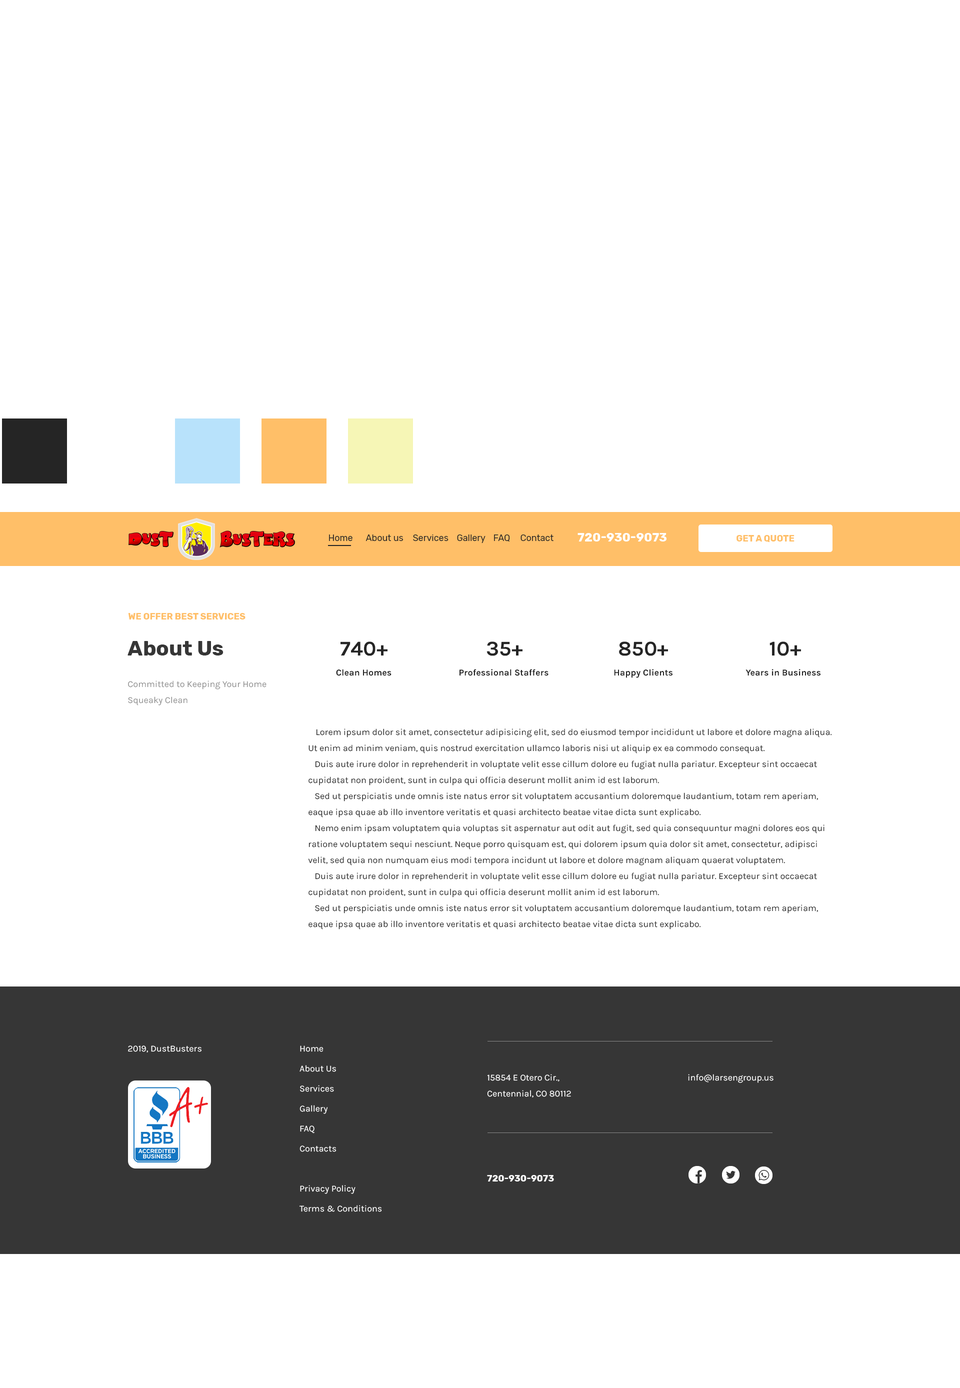
<style>
.page{position:relative;width:960px;height:1388px;background:#ffffff}
.page>*{position:absolute;margin:0}
.t1{font:12px "Rubik-Bold";color:#ffffff;text-transform:uppercase}
.t2{font:9px "Rubik-Regular";color:#252525}
.t3{font:9px "Rubik-Bold";color:#ffbf68;text-transform:uppercase}
.t4{font:21px "Rubik-Bold";color:#363636}
.t5{font:21px "Karla-Bold";color:#252525}
.t6{font:9px "Karla-Bold";color:#252525}
.t7{font:9px/16px "Karla-Regular";color:#909090}
.t8{font:9px/16px "Karla-Regular";color:#252525}
.t9{font:9px "Karla-Regular";color:#ffffff}
.t10{font:9px/20px "Karla-Regular";color:#ffffff}
.t11{font:9px/16.1px "Karla-Regular";color:#ffffff}
.t12{font:9px "Rubik-Bold";color:#ffffff;text-transform:uppercase}
</style>
<div class="page">
<p class="t1" style="left:578px;top:533px;width:88px;height:9px">720-930-9073</p>
<p class="t2" style="left:329px;top:534px;width:23px;height:7px">Home</p>
<p class="t2" style="left:366px;top:534px;width:37px;height:7px">About us</p>
<p class="t2" style="left:413px;top:534px;width:35px;height:7px">Services</p>
<p class="t2" style="left:457px;top:534px;width:29px;height:9px">Gallery</p>
<p class="t2" style="left:494px;top:534px;width:16px;height:8px">FAQ</p>
<p class="t2" style="left:520px;top:534px;width:34px;height:7px">Contact</p>
<p class="t3" style="left:736px;top:535px;width:58px;height:7px">Get a Quote</p>
<p class="t3" style="left:128px;top:613px;width:118px;height:7px">we offer best services</p>
<p class="t4" style="left:128px;top:641px;width:96px;height:15px">About Us</p>
<p class="t5" style="left:340px;top:642px;width:48px;height:14px">740+</p>
<p class="t5" style="left:486px;top:642px;width:36px;height:14px">35+</p>
<p class="t5" style="left:619px;top:642px;width:49px;height:14px">850+</p>
<p class="t5" style="left:770px;top:642px;width:31px;height:14px">10+</p>
<p class="t6" style="left:336px;top:669px;width:56px;height:7px">Clean Homes</p>
<p class="t6" style="left:460px;top:669px;width:88px;height:7px">Professional Staffers</p>
<p class="t6" style="left:614px;top:669px;width:58px;height:9px">Happy Clients</p>
<p class="t6" style="left:746px;top:669px;width:74px;height:7px">Years in Business</p>
<p class="t7" style="left:128px;top:680px;width:138px;height:26px">Committed to Keeping Your Home Squeaky Clean</p>
<p class="t8" style="left:308px;top:728px;width:524px;height:202px">Lorem ipsum dolor sit amet, consectetur adipisicing elit, sed do eiusmod tempor incididunt ut labore et dolore magna aliqua. Ut enim ad minim veniam, quis nostrud exercitation ullamco laboris nisi ut aliquip ex ea commodo consequat. <br>   Duis aute irure dolor in reprehenderit in voluptate velit esse cillum dolore eu fugiat nulla pariatur. Excepteur sint occaecat cupidatat non proident, sunt in culpa qui officia deserunt mollit anim id est laborum. <br>   Sed ut perspiciatis unde omnis iste natus error sit voluptatem accusantium doloremque laudantium, totam rem aperiam, eaque ipsa quae ab illo inventore veritatis et quasi architecto beatae vitae dicta sunt explicabo. <br>   Nemo enim ipsam voluptatem quia voluptas sit aspernatur aut odit aut fugit, sed quia consequuntur magni dolores eos qui ratione voluptatem sequi nesciunt. Neque porro quisquam est, qui dolorem ipsum quia dolor sit amet, consectetur, adipisci velit, sed quia non numquam eius modi tempora incidunt ut labore et dolore magnam aliquam quaerat voluptatem.<br>   Duis aute irure dolor in reprehenderit in voluptate velit esse cillum dolore eu fugiat nulla pariatur. Excepteur sint occaecat cupidatat non proident, sunt in culpa qui officia deserunt mollit anim id est laborum. <br>   Sed ut perspiciatis unde omnis iste natus error sit voluptatem accusantium doloremque laudantium, totam rem aperiam, eaque ipsa quae ab illo inventore veritatis et quasi architecto beatae vitae dicta sunt explicabo.</p>
<p class="t9" style="left:128px;top:1046px;width:74px;height:6px">© 2019, DustBusters</p>
<p class="t10" style="left:299px;top:1046px;width:83px;height:166px">Home<br>About Us<br>Services<br>Gallery<br>FAQ<br>Contacts<br><br>Privacy Policy<br>Terms &amp; Conditions</p>
<p class="t11" style="left:487px;top:1074px;width:84px;height:24px">15854 E Otero Cir.,<br>Centennial, CO 80112</p>
<p class="t9" style="left:688px;top:1074px;width:86px;height:9px">info@larsengroup.us</p>
<p class="t12" style="left:487px;top:1175px;width:67px;height:7px">720-930-9073</p>
</div>
